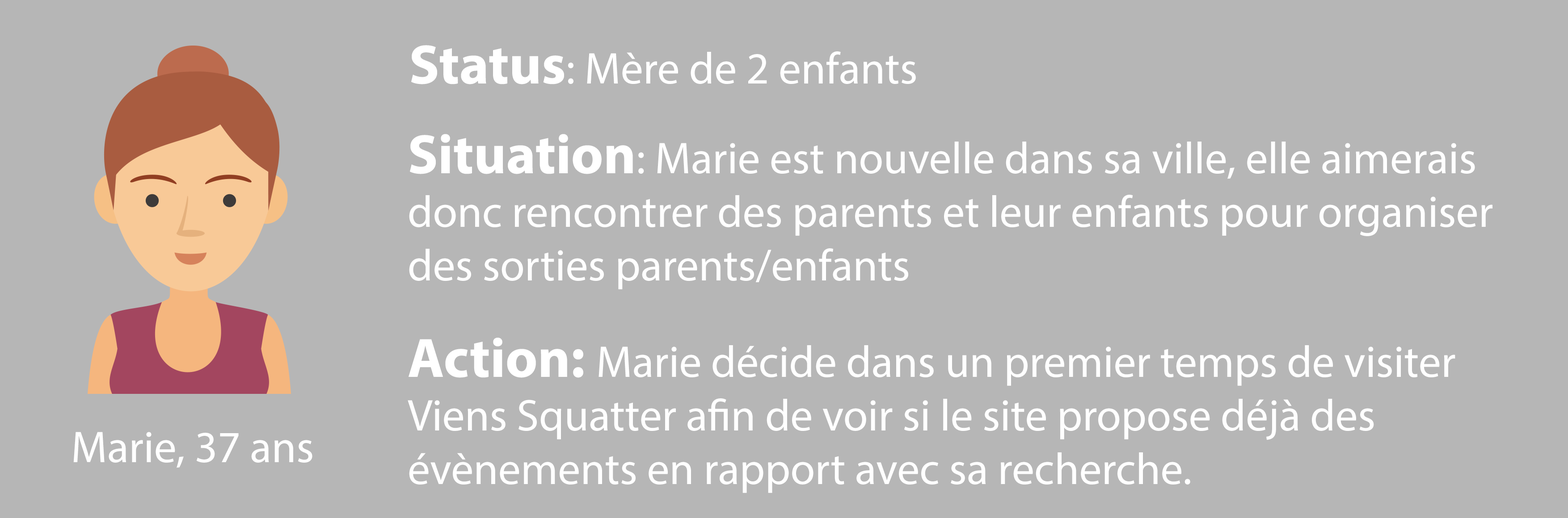
<style>
.page{position:relative;width:1568px;height:518px;background:#b6b6b6}
.page>*{position:absolute;margin:0}
.t1{font:44.7px "MyriadPro-Regular";color:#ffffff}
.t2{font:55.9px "MyriadPro-Bold";color:#ffffff}
</style>
<div class="page">
<p class="t1" style="left:411px;top:45px;width:505px;height:39px"><span class="t2">Status</span>: Mère de 2 enfants</p>
<p class="t1" style="left:409px;top:134px;width:1083px;height:156px"><span class="t2">Situation</span>: Marie est nouvelle dans sa ville, elle aimerais <br>donc rencontrer des parents et leur enfants pour organiser<br>des sorties parents/enfants</p>
<p class="t1" style="left:408px;top:338px;width:1047px;height:155px"><span class="t2">Action: </span>Marie décide dans un premier temps de visiter<br>Viens Squatter afin de voir si le site propose déjà des <br>évènements en rapport avec sa recherche.</p>
<p class="t1" style="left:73px;top:432px;width:239px;height:36px">Marie, 37 ans</p>
</div>
